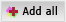
<style>
.page{position:relative;width:66px;height:22px}
.page>*{position:absolute;margin:0}
.t1{font:11.2px "Tahoma";letter-spacing:0.1em;color:#000000;scale:0.86 1}
</style>
<div class="page">
<p class="t1" style="left:22px;top:6px;width:35px;height:9px">Add all</p>
</div>
